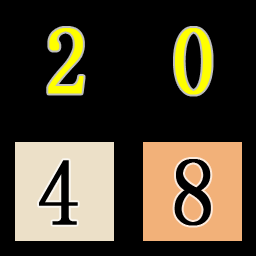
<style>
.page{position:relative;width:256px;height:256px;background:#000000}
.page>*{position:absolute;margin:0}
.t1{font:93.5px "SimSun";color:#ffff00;font-weight:bold;scale:0.91 1}
.t2{font:93.5px "SimSun";color:#000000;font-weight:bold;scale:0.91 1}
</style>
<div class="page">
<p class="t1" style="left:48px;top:28px;width:36px;height:66px">2</p>
<p class="t1" style="left:175px;top:28px;width:37px;height:67px">0</p>
<p class="t2" style="left:39px;top:160px;width:39px;height:65px">4</p>
<p class="t2" style="left:174px;top:159px;width:37px;height:67px">8</p>
</div>
